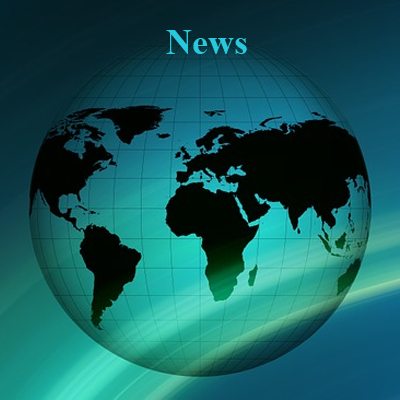
<style>
.page{position:relative;width:400px;height:400px}
.page>*{position:absolute;margin:0}
.t1{font:36px "TimesNewRomanPS-BoldMT";color:#28c9dc}
</style>
<div class="page">
<p class="t1" style="left:166px;top:30px;width:81px;height:24px">News</p>
</div>
